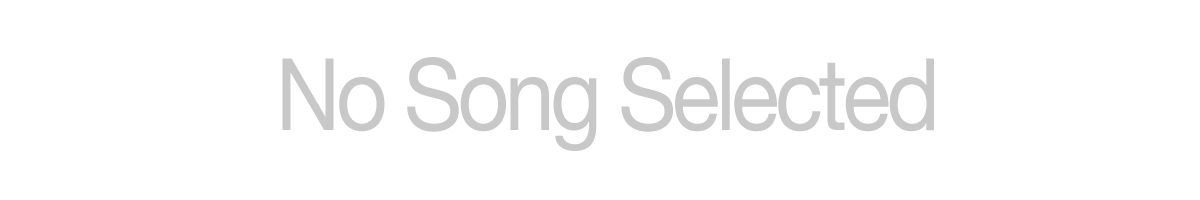
<style>
.page{position:relative;width:1200px;height:200px;background:#ffffff}
.page>*{position:absolute;margin:0}
.t1{font:100px "HelveticaNeue";letter-spacing:-0.05em;color:#c9c8c8;scale:0.9 1}
</style>
<div class="page">
<p class="t1" style="left:282px;top:57px;width:652px;height:94px">No Song Selected</p>
</div>
